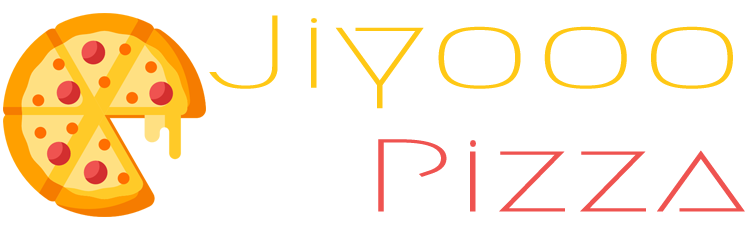
<style>
.page{position:relative;width:748px;height:232px;background:#ffffff}
.page>*{position:absolute;margin:0}
.t1{font:103.1px "Megrim";color:#ffc815;scale:1.7 1}
.t2{font:103.1px "Megrim";color:#ef5350;scale:1.7 1}
</style>
<div class="page">
<p class="t1" style="left:209px;top:15px;width:536px;height:197px">Jiyooo<br>   <span class="t2">Pizza</span></p>
</div>
